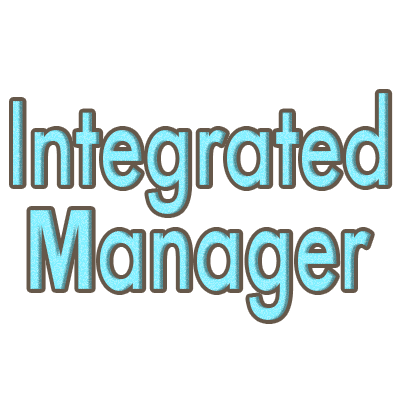
<style>
.page{position:relative;width:400px;height:400px;background:#ffffff}
.page>*{position:absolute;margin:0}
.t1{font:112px "FuturaNowHeadline-Medium";scale:0.75 1}
.t2{font:118.1px "FuturaNowHeadline-Medium";scale:0.71 1}
.t3{font:118.1px "FranklinGothic-Demi";scale:0.71 1}
</style>
<div class="page">
<p class="t1" style="left:13px;top:93px;width:376px;height:121px">Integrated</p>
<p class="t2" style="left:30px;top:210px;width:341px;height:110px"><span class="t3">M</span>anager</p>
</div>
